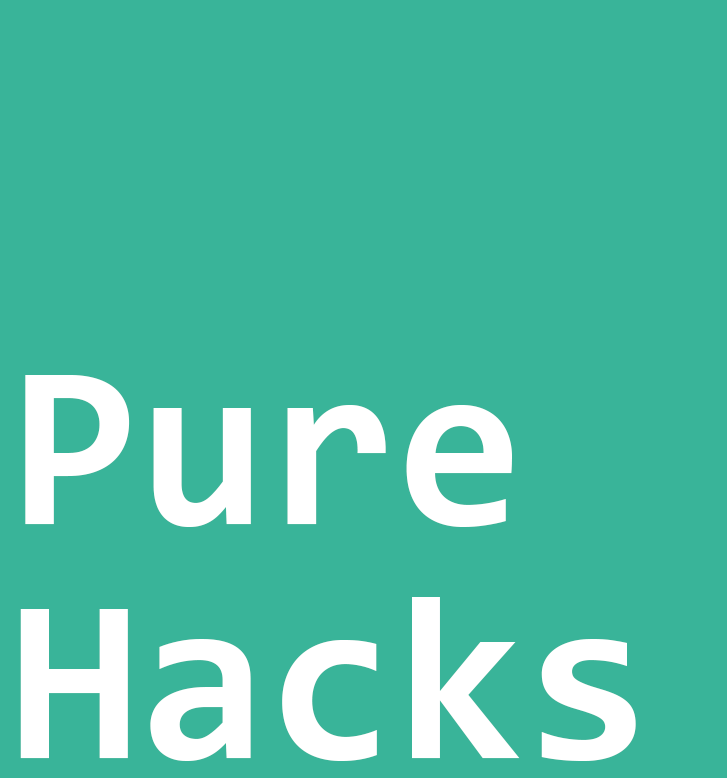
<style>
.page{position:relative;width:727px;height:778px;background:#39b499}
.page>*{position:absolute;margin:0}
.t1{font:233.8px/233.8px "Consolas-Bold";color:#ffffff}
</style>
<div class="page">
<p class="t1" style="left:20px;top:375px;width:616px;height:386px">Pure<br>Hacks</p>
</div>
